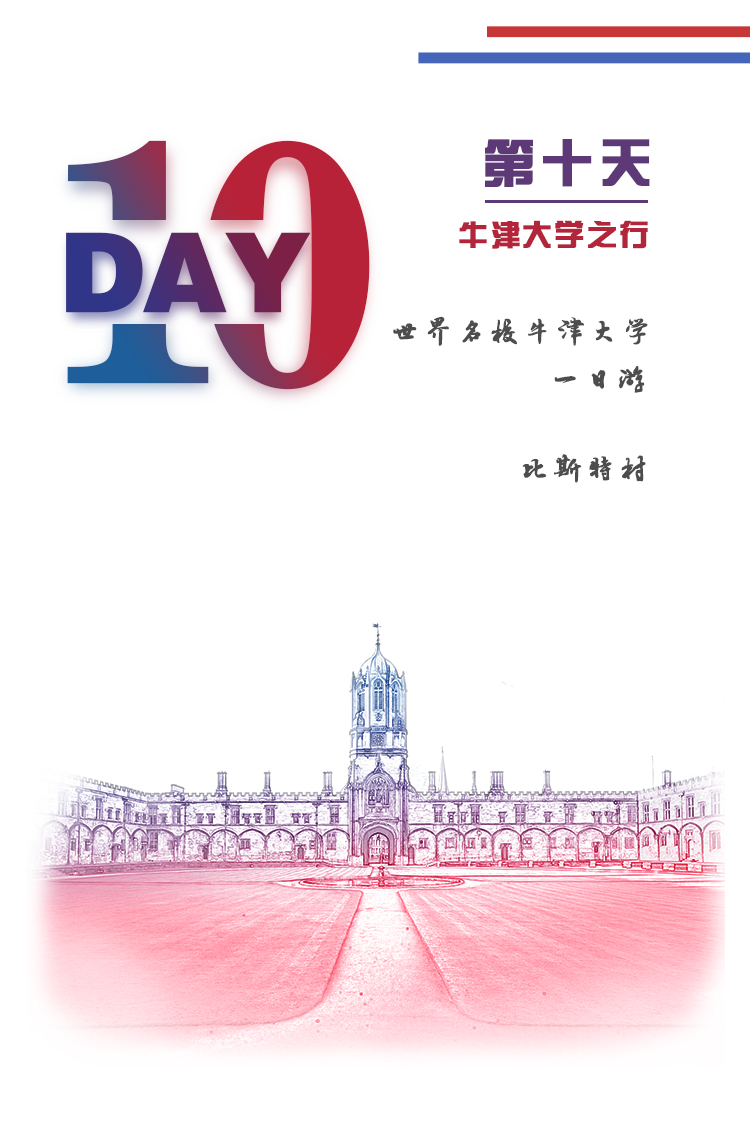
<style>
.page{position:relative;width:750px;height:1140px;background:#ffffff}
.page>*{position:absolute;margin:0}
.t1{font:350px "News706BT-BoldC";letter-spacing:-0.12em;font-weight:bold}
.t2{font:52px "FZZYJW--GB1-0";letter-spacing:0.1em;color:#5d3a77;font-weight:bold}
.t3{font:30px "FZZYJW--GB1-0";letter-spacing:0.05em;color:#b3253a;font-weight:bold}
.t4{font:110.2px "FZCCHJW--GB1-0";letter-spacing:-0.05em;font-weight:bold}
.t5{font:30px/48px "·½ÕýÂÀ½¨µÂ×ÖÌå";letter-spacing:0.075em;color:#4d4d4d;font-weight:bold}
.t6{font:30px "·½ÕýÂÀ½¨µÂ×ÖÌå";letter-spacing:0.075em;color:#4d4d4d;font-weight:bold}
</style>
<div class="page">
<p class="t1" style="left:67px;top:140px;width:303px;height:250px">10</p>
<p class="t2" style="left:485px;top:139px;width:165px;height:48px">第十天</p>
<p class="t3" style="left:459px;top:220px;width:189px;height:29px">牛津大学之行</p>
<p class="t4" style="left:66px;top:232px;width:245px;height:81px">DAY</p>
<p class="t5" style="left:393px;top:316px;width:255px;height:77px">世界名校牛津大学<br>     一日游</p>
<p class="t6" style="left:522px;top:454px;width:124px;height:29px">比斯特村</p>
</div>
